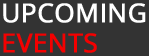
<style>
.page{position:relative;width:149px;height:56px;background:#333333}
.page>*{position:absolute;margin:0}
.t1{font:26px/30px "OpenSans";color:#ffffff;font-weight:bold}
.t2{font:26px/30px "OpenSans";color:#f50000;font-weight:bold}
</style>
<div class="page">
<p class="t1" style="left:3px;top:3px;width:143px;height:50px">UPCOMING<br><span class="t2">EVENTS</span></p>
</div>
